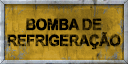
<style>
.page{position:relative;width:128px;height:64px}
.page>*{position:absolute;margin:0}
.t1{font:15.5px/16px "Arial-BoldMT";letter-spacing:-0.06em;text-transform:uppercase;font-weight:bold;scale:0.95 1}
</style>
<div class="page">
<p class="t1" style="left:7px;top:18px;width:114px;height:32px;text-align:center">bomba de<br>refriGERAÇÃO</p>
</div>
